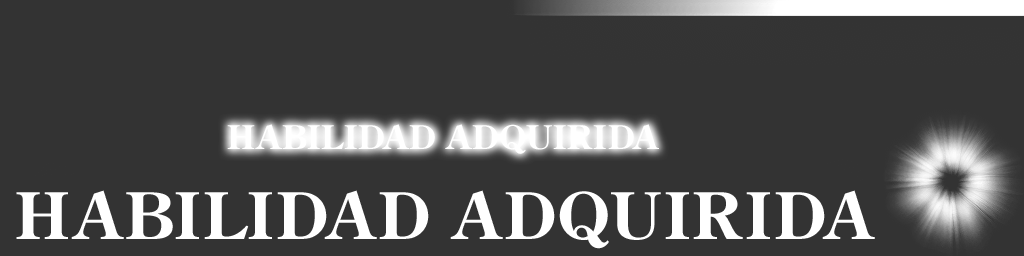
<style>
.page{position:relative;width:1024px;height:256px;background:#333333}
.page>*{position:absolute;margin:0}
.t1{font:32.4px "CenturyOldStyleStd-Bold";color:#ffffff;text-transform:uppercase;scale:1.04 1}
.t2{font:63.8px "CenturyOldStyleStd-Bold";letter-spacing:0.015em;color:#ffffff;text-transform:uppercase}
</style>
<div class="page">
<p class="t1" style="left:227px;top:124px;width:432px;height:30px">habilidad adquirida</p>
<p class="t2" style="left:16px;top:190px;width:859px;height:59px">habilidad adquirida</p>
</div>
